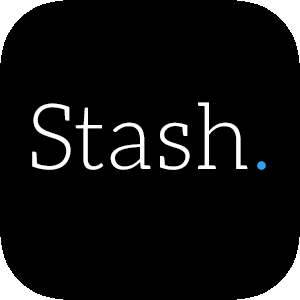
<style>
.page{position:relative;width:300px;height:300px;background:#000000}
.page>*{position:absolute;margin:0}
.t1{font:91.4px "Aleo-Light";color:#ffffff}
.t2{font:91.4px "Aleo-Light";color:#379eea}
</style>
<div class="page">
<p class="t1" style="left:32px;top:102px;width:234px;height:68px">Stash<span class="t2">.</span></p>
</div>
